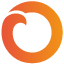
<style>
.page{position:relative;width:64px;height:64px;background:#ffffff}
.page>*{position:absolute;margin:0}
.t1{font:85px "Fonarto";letter-spacing:-0.025em}
</style>
<div class="page">
<p class="t1" style="left:1px;top:1px;width:62px;height:63px">O</p>
</div>
